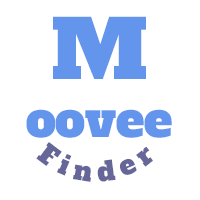
<style>
.page{position:relative;width:200px;height:200px;background:#ffffff}
.page>*{position:absolute;margin:0}
.t1{font:48px "AlfaSlabOne-Regular";color:#6495ed}
.t2{font:80px "AlfaSlabOne-Regular";color:#6495ed}
.t3{font:26.7px "AlfaSlabOne-Regular";letter-spacing:0.3em;color:#666699}
</style>
<div class="page">
<p class="t1" style="left:26px;top:16px;width:146px;height:122px;text-align:center"><span class="t2">M<br></span>oovee</p>
<p class="t3" style="left:36px;top:142px;width:117px;height:40px">Finder</p>
</div>
